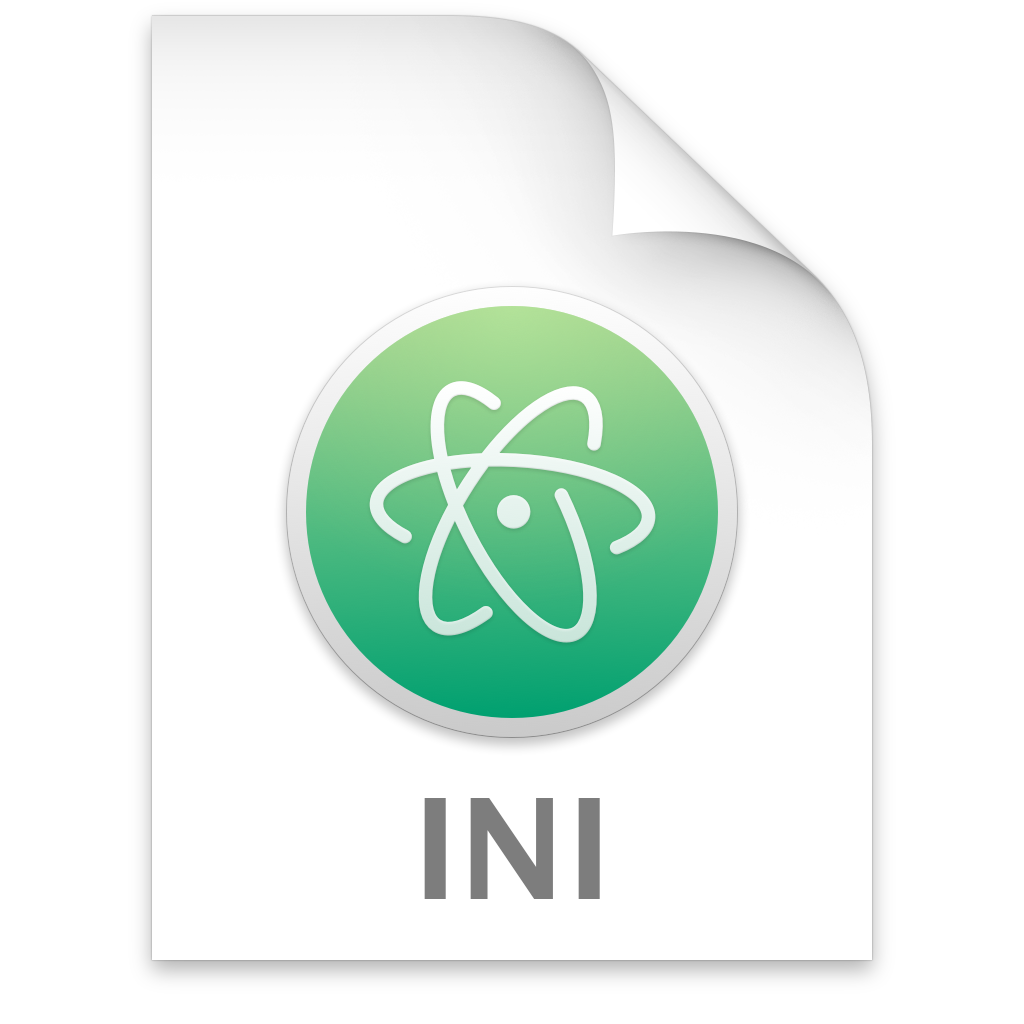
<style>
.page{position:relative;width:1024px;height:1024px;background:#ffffff}
.page>*{position:absolute;margin:0}
.t1{font:140px "LucidaGrande-Bold";color:#7d7d7d}
</style>
<div class="page">
<p class="t1" style="left:424px;top:798px;width:176px;height:101px">INI</p>
</div>
